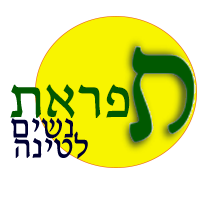
<style>
.page{position:relative;width:198px;height:198px;background:#ffffff}
.page>*{position:absolute;margin:0}
.t1{font:60px "Narkisim";color:#015901}
.t2{font:36px "Narkisim";color:#000033}
</style>
<div class="page">
<p class="t1" style="left:10px;top:84px;width:120px;height:34px">תארפ</p>
<p class="t2" style="left:11px;top:118px;width:62px;height:21px">םישנ</p>
</div>
